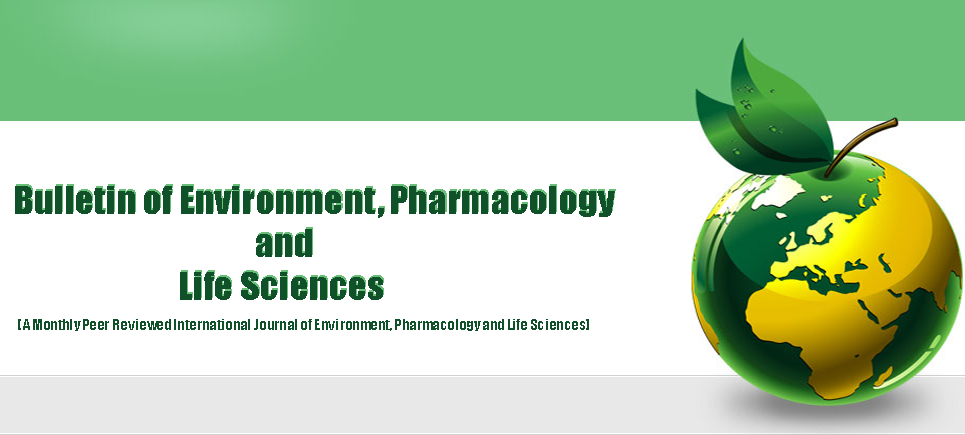
<style>
.page{position:relative;width:965px;height:435px;background:#ffffff}
.page>*{position:absolute;margin:0}
.t1{font:36px "Impact";color:#105129;scale:1.06 1}
.t2{font:14px "Impact";color:#105129;scale:1.06 1}
</style>
<div class="page">
<p class="t1" style="left:16px;top:184px;width:600px;height:114px">Bulletin of Environment, Pharmacology <br>                                      and<br>                          Life Sciences</p>
<p class="t1" style="left:15px;top:186px;width:600px;height:114px">Bulletin of Environment, Pharmacology <br>                                      and <br>                          Life Sciences</p>
<p class="t2" style="left:18px;top:319px;width:571px;height:12px">[A Monthly Peer Reviewed International Journal of Environment, Pharmacology and Life Sciences]</p>
</div>
